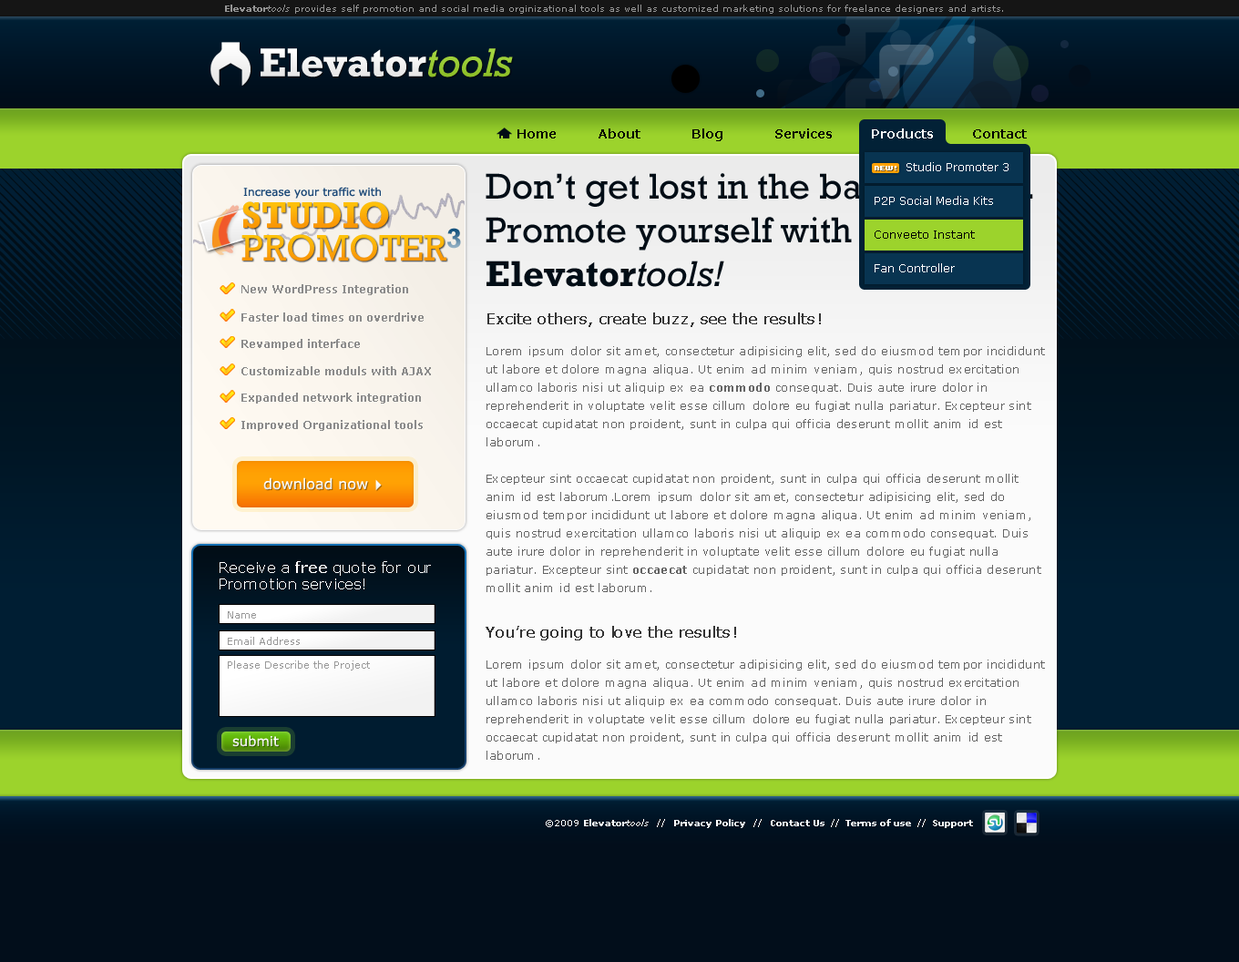
<style>
.page{position:relative;width:1239px;height:962px}
.page>*{position:absolute;margin:0}
.t1{font:9.1px "Verdana";color:#949494}
.t2{font:9.1px "Verdana-Bold";color:#949494}
.t3{font:9.1px "Verdana-Italic";color:#949494}
.t4{font:40.5px "Rockwell-Bold";color:#ffffff}
.t5{font:40.5px "Rockwell-Italic";color:#9cd32c}
.t6{font:12.8px "Verdana-Bold";color:#000000}
.t7{font:12.8px "Verdana-Bold";color:#ffffff}
.t8{font:36.4px "Rockwell";color:#010d16}
.t9{font:36.4px "Rockwell-Bold";color:#010d16}
.t10{font:36.4px "Rockwell-Italic";color:#010d16}
.t11{font:10.9px "Verdana";color:#ffffff}
.t12{font:10.9px "Verdana";color:#1c4978}
.t13{font:37.5px "Rockwell-Bold";color:#fcae08}
.t14{font:28px "Rockwell-Bold"}
.t15{font:10.9px "Verdana";color:#000000}
.t16{font:37.5px "Rockwell";color:#fcad08}
.t17{font:10.9px "Verdana-Bold";color:#8b8b8b}
.t18{font:10.9px/18.2px "Verdana";color:#646464}
.t19{font:15.5px/27.3px "Verdana";color:#333333}
.t20{font:10.9px/18.2px "Verdana-Bold";color:#646464}
.t21{font:14.6px "Verdana";color:#ffffff}
.t22{font:14.6px "Verdana"}
.t23{font:14.9px/16.6px "Verdana";color:#ffffff}
.t24{font:14.9px/16.6px "Verdana-Bold";color:#ffffff}
.t25{font:10px "Verdana";color:#999999}
.t26{font:13.6px "Verdana";color:#ffffff}
.t27{font:9.1px "Verdana-Bold";color:#ffffff}
.t28{font:9.1px "Verdana";color:#ffffff}
.t29{font:9.1px "Verdana-Italic";color:#ffffff}
</style>
<div class="page">
<p class="t1" style="left:225px;top:5px;width:778px;height:9px"><span class="t2">Elevator</span><span class="t3">tools</span> provides self promotion and social media orginizational tools as well as customized marketing solutions for freelance designers and artists.</p>
<p class="t4" style="left:261px;top:48px;width:252px;height:29px">Elevator<span class="t5">tools</span></p>
<p class="t6" style="left:518px;top:129px;width:38px;height:10px">Home</p>
<p class="t6" style="left:599px;top:128px;width:42px;height:11px">About</p>
<p class="t6" style="left:693px;top:128px;width:30px;height:13px">Blog</p>
<p class="t6" style="left:775px;top:128px;width:57px;height:11px">Services</p>
<p class="t7" style="left:872px;top:128px;width:61px;height:11px">Products</p>
<p class="t7" style="left:872px;top:128px;width:61px;height:11px">Products</p>
<p class="t6" style="left:973px;top:129px;width:54px;height:10px">Contact</p>
<p class="t8" style="left:486px;top:173px;width:547px;height:114px">Don’t get lost in the background. Promote yourself with <span class="t9">Elevator</span><span class="t10">tools!</span></p>
<p class="t11" style="left:907px;top:162px;width:102px;height:9px">Studio Promoter 3</p>
<p class="t12" style="left:243px;top:187px;width:138px;height:12px">Increase your traffic with</p>
<p class="t11" style="left:875px;top:196px;width:118px;height:9px">P2P Social Media Kits</p>
<p class="t13" style="left:242px;top:201px;width:147px;height:28px">STUDIO</p>
<p class="t14" style="left:447px;top:228px;width:14px;height:21px">3</p>
<p class="t15" style="left:875px;top:231px;width:100px;height:8px">Conveeto Instant</p>
<p class="t16" style="left:241px;top:234px;width:205px;height:28px">PROMOTER</p>
<p class="t11" style="left:875px;top:263px;width:80px;height:9px">Fan Controller</p>
<p class="t17" style="left:241px;top:284px;width:167px;height:11px">New WordPress Integration</p>
<p class="t17" style="left:241px;top:313px;width:183px;height:9px">Faster load times on overdrive</p>
<p class="t18" style="left:486px;top:313px;width:559px;height:447px"><span class="t10"><br></span><span class="t19">Excite others, create buzz, see the results!<br><br></span>Lorem ipsum dolor sit amet, consectetur adipisicing elit, sed do eiusmod tempor incididunt ut labore et dolore magna aliqua. Ut enim ad minim veniam, quis nostrud exercitation ullamco laboris nisi ut aliquip ex ea <span class="t20">commodo</span> consequat. Duis aute irure dolor in reprehenderit in voluptate velit esse cillum dolore eu fugiat nulla pariatur. Excepteur sint occaecat cupidatat non proident, sunt in culpa qui officia deserunt mollit anim id est laborum.<br><br>Excepteur sint occaecat cupidatat non proident, sunt in culpa qui officia deserunt mollit anim id est laborum.Lorem ipsum dolor sit amet, consectetur adipisicing elit, sed do eiusmod tempor incididunt ut labore et dolore magna aliqua. Ut enim ad minim veniam, quis nostrud exercitation ullamco laboris nisi ut aliquip ex ea commodo consequat. Duis aute irure dolor in reprehenderit in voluptate velit esse cillum dolore eu fugiat nulla pariatur. Excepteur sint <span class="t20">occaecat</span> cupidatat non proident, sunt in culpa qui officia deserunt mollit anim id est laborum.<br><br><span class="t19">You’re going to love the results!<br><br></span>Lorem ipsum dolor sit amet, consectetur adipisicing elit, sed do eiusmod tempor incididunt ut labore et dolore magna aliqua. Ut enim ad minim veniam, quis nostrud exercitation ullamco laboris nisi ut aliquip ex ea commodo consequat. Duis aute irure dolor in reprehenderit in voluptate velit esse cillum dolore eu fugiat nulla pariatur. Excepteur sint occaecat cupidatat non proident, sunt in culpa qui officia deserunt mollit anim id est laborum.</p>
<p class="t17" style="left:241px;top:339px;width:119px;height:11px">Revamped interface</p>
<p class="t17" style="left:241px;top:366px;width:190px;height:9px">Customizable moduls with AJAX</p>
<p class="t17" style="left:241px;top:393px;width:180px;height:11px">Expanded network integration</p>
<p class="t17" style="left:241px;top:420px;width:182px;height:11px">Improved Organizational tools</p>
<p class="t21" style="left:263px;top:477px;width:105px;height:13px">download now</p>
<p class="t22" style="left:264px;top:478px;width:105px;height:13px">download now</p>
<p class="t23" style="left:220px;top:561px;width:211px;height:29px">Receive a <span class="t24">free</span> quote for our<br>Promotion services!</p>
<p class="t25" style="left:228px;top:611px;width:28px;height:8px">Name</p>
<p class="t25" style="left:228px;top:637px;width:72px;height:8px">Email Address</p>
<p class="t25" style="left:228px;top:661px;width:142px;height:10px">Please Describe the Project</p>
<p class="t26" style="left:232px;top:735px;width:47px;height:12px">submit</p>
<p class="t27" style="left:546px;top:819px;width:427px;height:9px"><span class="t28">©2009 </span>Elevator<span class="t29">tools</span><span class="t28">  //  </span>Privacy Policy<span class="t28">  //  </span>Contact Us  <span class="t28">//</span>  Terms of use  <span class="t28">//</span>  Support</p>
</div>
